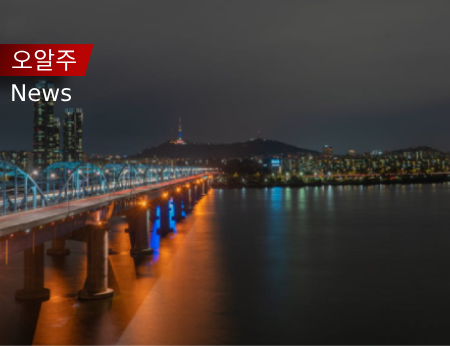
<style>
.page{position:relative;width:450px;height:346px}
.page>*{position:absolute;margin:0}
.t1{font:24px "GmarketSansTTFMedium";color:#ffffff}
.t2{font:23px "GmarketSansTTFMedium";color:#ffffff}
</style>
<div class="page">
<p class="t1" style="left:12px;top:49px;width:64px;height:22px">오알주</p>
<p class="t2" style="left:12px;top:84px;width:60px;height:18px">News</p>
</div>
